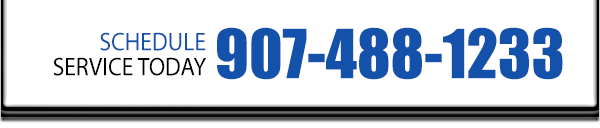
<style>
.page{position:relative;width:600px;height:128px;background:#ffffff}
.page>*{position:absolute;margin:0}
.t1{font:62.8px "Impact";color:#1451aa}
.t2{font:25.6px/24.9px "MyriadPro-Regular";color:#000000;scale:0.93 1}
.t3{font:25.6px/24.9px "MyriadPro-Regular";color:#1451aa;scale:0.93 1}
</style>
<div class="page">
<p class="t1" style="left:217px;top:27px;width:346px;height:53px">907-488-1233</p>
<p class="t2" style="left:53px;top:32px;width:153px;height:44px;text-align:right"><span class="t3">SCHEDULE<br></span>SERVICE TODAY</p>
</div>
